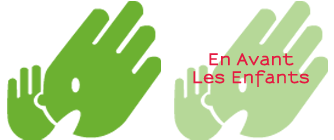
<style>
.page{position:relative;width:334px;height:140px;background:#ffffff}
.page>*{position:absolute;margin:0}
.t1{font:15px "Sansumi-Bold";letter-spacing:0.06em;color:#e41a41;font-weight:bold}
</style>
<div class="page">
<p class="t1" style="left:193px;top:53px;width:116px;height:34px;text-align:center">En Avant<br>Les Enfants</p>
</div>
